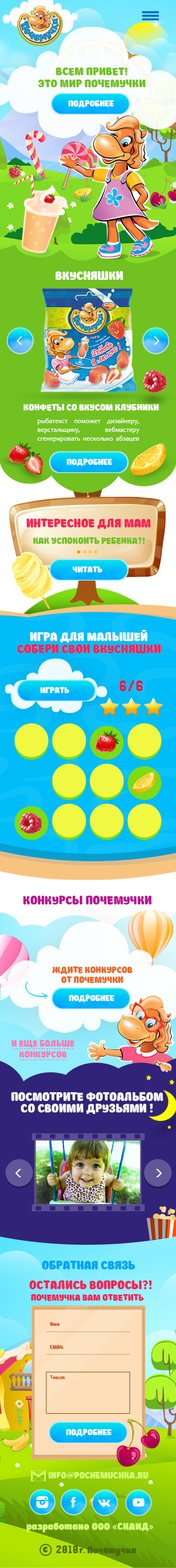
<style>
.page{position:relative;width:176px;height:1568px}
.page>*{position:absolute;margin:0}
.t1{font:12.2px/12.2px "Boomboom";color:#71c121;text-transform:uppercase}
.t2{font:9.3px "Boomboom";color:#ffffff;text-transform:uppercase}
.t3{font:13.2px "Boomboom";color:#ffffff;text-transform:uppercase}
.t4{font:9.9px "Boomboom";color:#ffffff;text-transform:uppercase}
.t5{font:6.6px/8.8px "Candara";color:#ffffff}
.t6{font:13.2px "Boomboom";color:#ff2255;text-transform:uppercase}
.t7{font:9.9px "Boomboom";color:#71c121;text-transform:uppercase}
.t8{font:13.4px "Natasha";color:#f5163c;text-transform:uppercase}
.t9{font:13.2px "Boomboom";color:#bb1691;text-transform:uppercase}
.t10{font:9.9px/9.4px "Boomboom";color:#f26522;text-transform:uppercase}
.t11{font:9.9px/9.4px "Natasha";letter-spacing:-0.1em;color:#f26522;text-transform:uppercase}
.t12{font:9.9px/11.3px "Boomboom";color:#ff7ab4;text-transform:uppercase}
.t13{font:13.2px/11.5px "Boomboom";color:#f7f7f7;text-transform:uppercase}
.t14{font:13.2px "Boomboom";color:#00a5fa;text-transform:uppercase}
.t15{font:9.9px "Boomboom";color:#ff2255;text-transform:uppercase}
.t16{font:5.4px "Boomboom";color:#cf5c2a}
.t17{font:5.4px "Boomboom";color:#cf5c2a;text-transform:uppercase}
.t18{font:9.9px "Boomboom";color:#d2fc74;text-transform:uppercase}
.t19{font:9.9px "CooperBlack";color:#d2fc74;text-transform:uppercase}
.t20{font:10.5px "Boomboom";color:#d2fc74;font-weight:bold}
.t21{font:10.5px "MyriadPro-Regular";color:#d2fc74;font-weight:bold}
.t22{font:9.9px "Boomboom";color:#4a6d04;font-weight:bold}
.t23{font:9.9px "Boomboom";color:#4a6d03;font-weight:bold}
.t24{font:9.9px "Natasha";color:#4a6d03;text-transform:uppercase}
.t25{font:9.9px "Boomboom";color:#4a6d03}
.t26{font:9.9px "MyriadPro-Regular";color:#4a6d03}
</style>
<div class="page">
<p class="t1" style="left:38px;top:67px;width:107px;height:21px;text-align:center">Всем привет!<br>это мир почемучки</p>
<p class="t2" style="left:68px;top:100px;width:46px;height:8px">подробнее</p>
<p class="t3" style="left:55px;top:271px;width:68px;height:9px">вкусняшки</p>
<p class="t4" style="left:23px;top:404px;width:136px;height:7px">Конфеты со вкусом клубники</p>
<p class="t5" style="left:37px;top:418px;width:102px;height:24px;text-align:justify">рыбатекст поможет дизайнеру, верстальщику, вебмастеру сгенерировать несколько абзацев более менее осмысленного текста рыбы на русском языке</p>
<p class="t2" style="left:66px;top:458px;width:46px;height:8px">подробнее</p>
<p class="t6" style="left:26px;top:519px;width:124px;height:10px">Интересное для мам</p>
<p class="t7" style="left:33px;top:537px;width:111px;height:7px">как успокоить ребенка?!</p>
<p class="t2" style="left:72px;top:566px;width:30px;height:6px">читать</p>
<p class="t3" style="left:30px;top:630px;width:117px;height:13px">ИГра для малышей</p>
<p class="t6" style="left:17px;top:644px;width:144px;height:9px">Собери свои вкусняшки</p>
<p class="t2" style="left:40px;top:687px;width:29px;height:6px">играть</p>
<p class="t8" style="left:120px;top:681px;width:23px;height:10px">6/6</p>
<p class="t9" style="left:23px;top:896px;width:128px;height:8px">конкурсы почемучки</p>
<p class="t10" style="left:52px;top:966px;width:80px;height:17px;text-align:center"><span class="t11"> <br></span>ждите конкурсов <br>от Почемучки</p>
<p class="t2" style="left:69px;top:994px;width:45px;height:8px">подробнее</p>
<p class="t12" style="left:12px;top:1040px;width:63px;height:18px;text-align:justify">и еще больше <br>конкурсов</p>
<p class="t13" style="left:11px;top:1092px;width:152px;height:22px;text-align:justify">ПОСМОТРИТЕ фотоальбом <br>СО СВОИМИ ДРУЗЬЯМИ !</p>
<p class="t14" style="left:42px;top:1261px;width:93px;height:8px">Обратная связь</p>
<p class="t6" style="left:29px;top:1280px;width:122px;height:9px">Остались Вопросы?!</p>
<p class="t15" style="left:31px;top:1294px;width:112px;height:7px">Почемучка Вам ответить</p>
<p class="t16" style="left:50px;top:1322px;width:9px;height:4px">Имя</p>
<p class="t17" style="left:49px;top:1345px;width:15px;height:4px">Email</p>
<p class="t16" style="left:50px;top:1375px;width:15px;height:4px">Текст</p>
<p class="t2" style="left:66px;top:1429px;width:45px;height:7px">подробнее</p>
<p class="t18" style="left:48px;top:1472px;width:100px;height:7px">info<span class="t19">@</span>pochemuchka.ru</p>
<p class="t20" style="left:26px;top:1522px;width:127px;height:11px">разработано ООО <span class="t21">«</span>СКАИД<span class="t21">»</span></p>
<p class="t22" style="left:43px;top:1547px;width:5px;height:6px">с</p>
<p class="t23" style="left:56px;top:1545px;width:80px;height:11px"><span class="t24">2018</span><span class="t25">г</span><span class="t26">. </span>Почемучка</p>
</div>
